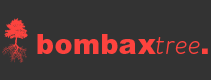
<style>
.page{position:relative;width:211px;height:80px;background:#333333}
.page>*{position:absolute;margin:0}
.t1{font:27.2px "ArialMT-Black";letter-spacing:0.025em;color:#fd433e}
.t2{font:27.2px "BrandonText-LightItalic";letter-spacing:0.025em;color:#fd433e}
</style>
<div class="page">
<p class="t1" style="left:37px;top:34px;width:171px;height:20px">bombax<span class="t2">tree</span>.</p>
</div>
